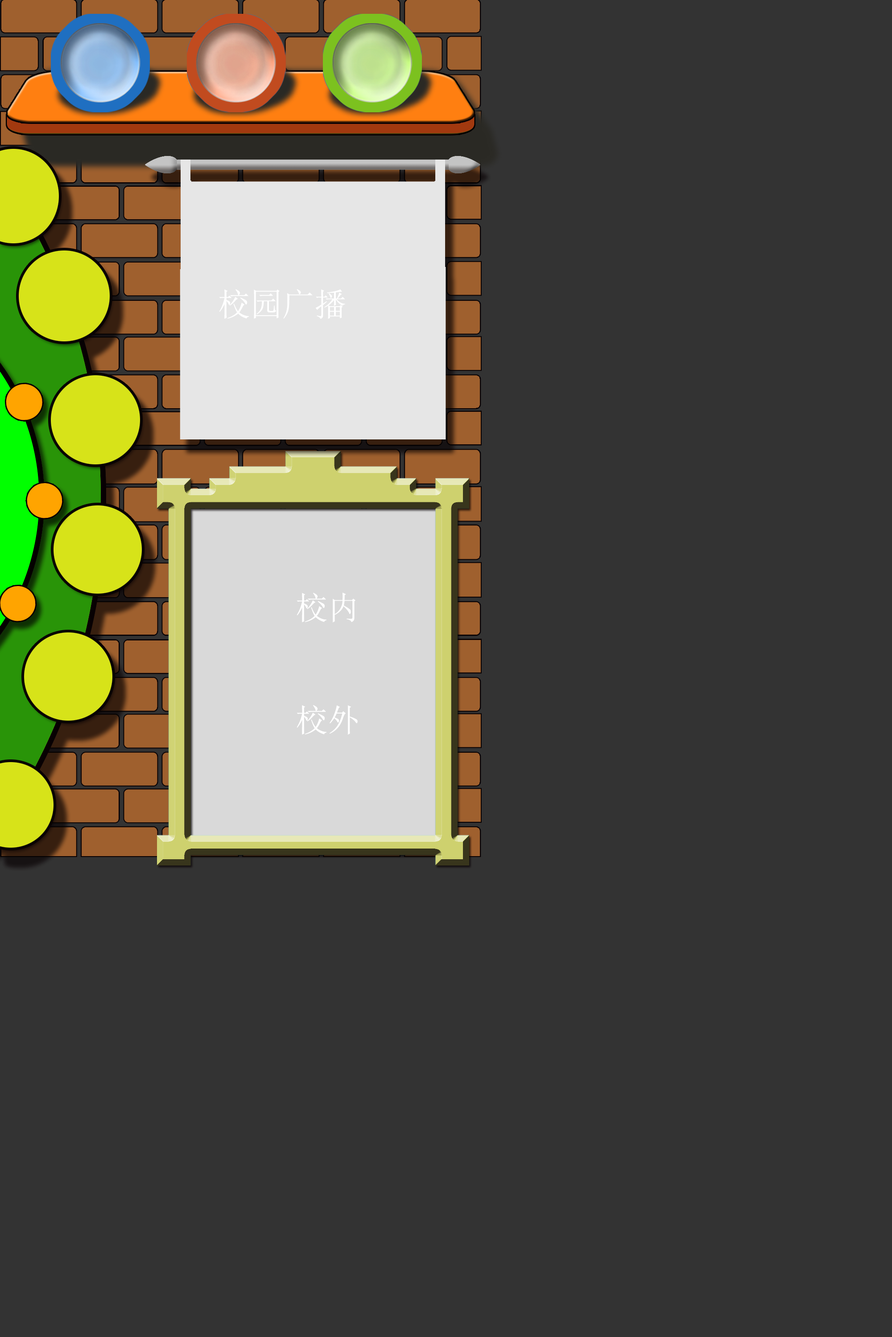
<style>
.page{position:relative;width:892px;height:1337px;background:#333333}
.page>*{position:absolute;margin:0}
.t1{font:32.1px "NSimSun";color:#ffffff}
</style>
<div class="page">
<p class="t1" style="left:219px;top:289px;width:126px;height:30px">校园广播</p>
<p class="t1" style="left:296px;top:592px;width:62px;height:143px">校内<br><br>校外</p>
</div>
